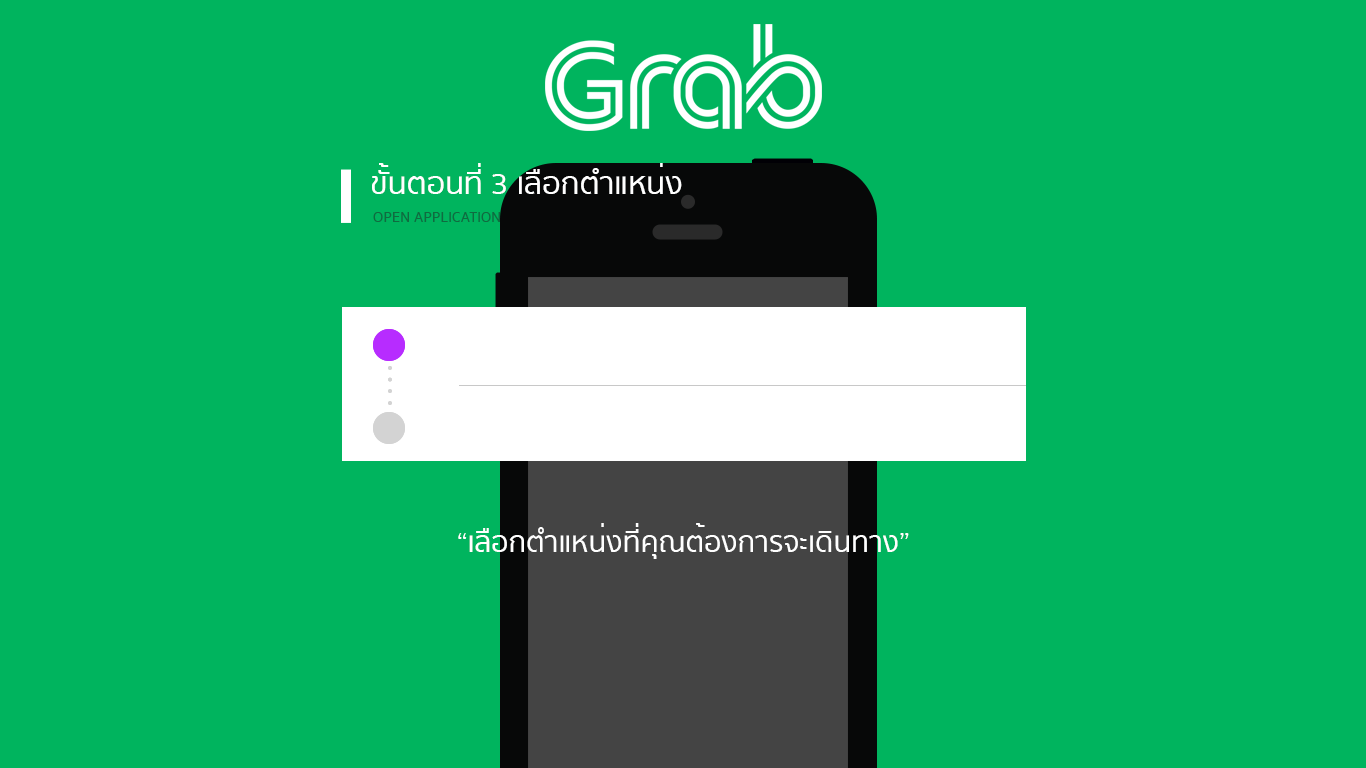
<style>
.page{position:relative;width:1366px;height:768px;background:#00b45e}
.page>*{position:absolute;margin:0}
.t1{font:27.9px "SukhumvitSet-Medium";color:#ffffff}
.t2{font:13.2px "SukhumvitSet-Medium";color:#106b40}
.t3{font:25.8px "SukhumvitSet-Medium";color:#ffffff}
</style>
<div class="page">
<p class="t1" style="left:372px;top:163px;width:310px;height:31px">ขั้นตอนที่ 3 เลือกตำแหน่ง</p>
<p class="t2" style="left:373px;top:212px;width:127px;height:10px">OPEN APPLICATION</p>
<p class="t3" style="left:458px;top:523px;width:451px;height:36px">“เลือกตำแหน่งที่คุณต้องการจะเดินทาง”</p>
</div>
